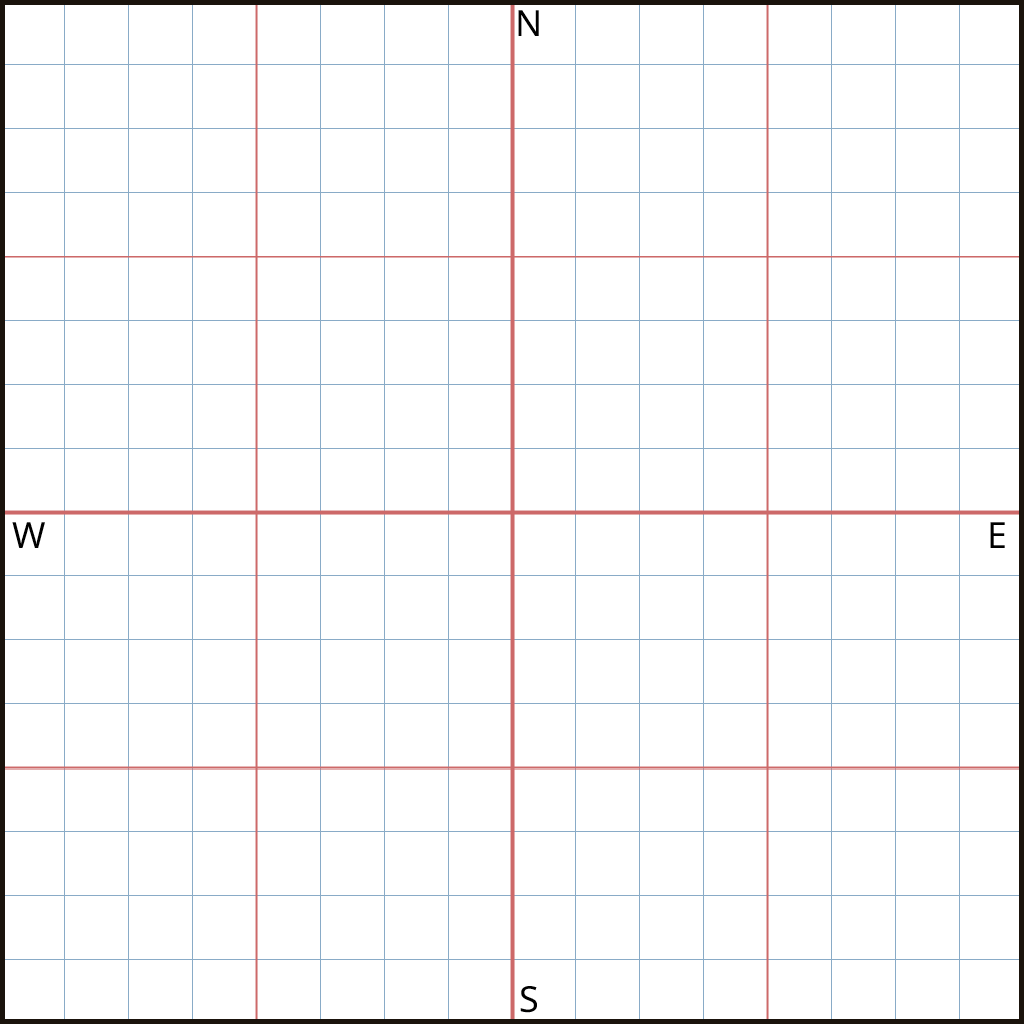
<style>
.page{position:relative;width:1024px;height:1024px;background:#ffffff}
.page>*{position:absolute;margin:0}
.t1{font:36px "NotoSans-Regular";color:#000000}
</style>
<div class="page">
<p class="t1" style="left:518px;top:10px;width:21px;height:26px">N</p>
<p class="t1" style="left:12px;top:522px;width:33px;height:26px">W</p>
<p class="t1" style="left:990px;top:522px;width:15px;height:26px">E</p>
<p class="t1" style="left:520px;top:986px;width:17px;height:27px">S</p>
</div>
